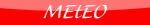
<style>
.page{position:relative;width:150px;height:25px;background:#ff0000}
.page>*{position:absolute;margin:0}
.t1{font:24px "AlexaStd";color:#ffffff}
</style>
<div class="page">
<p class="t1" style="left:43px;top:4px;width:64px;height:15px">MEtEO</p>
</div>
